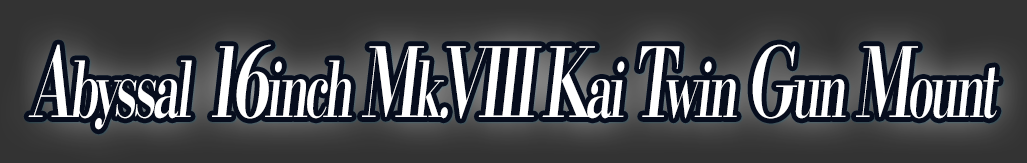
<style>
.page{position:relative;width:1027px;height:163px}
.page>*{position:absolute;margin:0}
.t1{font:76.8px "KochoStd-Heavy";letter-spacing:-0.08em;color:#ffffff;font-style:italic;scale:0.62 1}
.t2{font:96px "KochoStd-Heavy";letter-spacing:-0.08em;color:#ffffff;font-style:italic;scale:0.62 1}
</style>
<div class="page">
<p class="t1" style="left:28px;top:44px;width:971px;height:86px"><span class="t2">A</span>byssal<span class="t2"> 16</span>inch <span class="t2">M</span>k.<span class="t2">VIII K</span>ai <span class="t2">T</span>win <span class="t2">G</span>un <span class="t2">M</span>ount</p>
</div>
